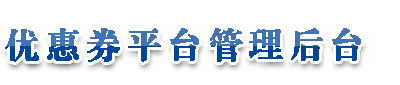
<style>
.page{position:relative;width:400px;height:85px;background:#ffffff}
.page>*{position:absolute;margin:0}
.t1{font:36px "FZDBSJW--GB1-0";letter-spacing:0.1em;font-weight:bold}
</style>
<div class="page">
<p class="t1" style="left:5px;top:28px;width:356px;height:34px">优惠券平台管理后台</p>
</div>
